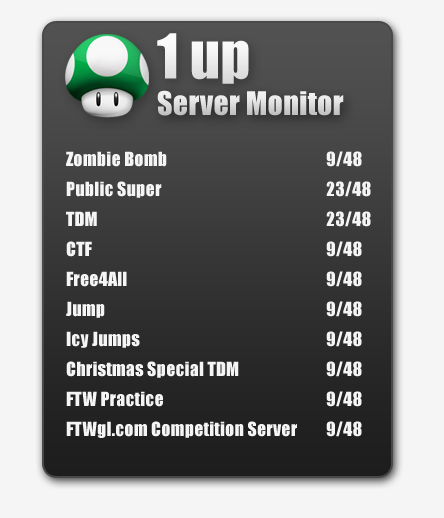
<style>
.page{position:relative;width:444px;height:518px;background:#f5f5f5}
.page>*{position:absolute;margin:0}
.t1{font:57.2px "Impact";letter-spacing:0.01em;color:#ffffff}
.t2{font:30px "Impact";letter-spacing:0.01em;color:#dcdcdc}
.t3{font:18px "Impact";letter-spacing:0.01em;color:#f5f5f5}
</style>
<div class="page">
<p class="t1" style="left:157px;top:33px;width:92px;height:51px">1 up</p>
<p class="t2" style="left:157px;top:90px;width:187px;height:26px">Server Monitor</p>
<p class="t3" style="left:66px;top:151px;width:101px;height:16px">Zombie Bomb</p>
<p class="t3" style="left:326px;top:151px;width:36px;height:16px">9/48</p>
<p class="t3" style="left:66px;top:181px;width:96px;height:17px">Public Super</p>
<p class="t3" style="left:326px;top:181px;width:45px;height:16px">23/48</p>
<p class="t3" style="left:66px;top:211px;width:31px;height:15px">TDM</p>
<p class="t3" style="left:326px;top:211px;width:45px;height:16px">23/48</p>
<p class="t3" style="left:66px;top:241px;width:26px;height:16px">CTF</p>
<p class="t3" style="left:326px;top:241px;width:36px;height:16px">9/48</p>
<p class="t3" style="left:66px;top:271px;width:61px;height:16px">Free4All</p>
<p class="t3" style="left:326px;top:271px;width:36px;height:16px">9/48</p>
<p class="t3" style="left:66px;top:301px;width:39px;height:17px">Jump</p>
<p class="t3" style="left:326px;top:301px;width:36px;height:16px">9/48</p>
<p class="t3" style="left:66px;top:331px;width:74px;height:17px">Icy Jumps</p>
<p class="t3" style="left:326px;top:331px;width:36px;height:16px">9/48</p>
<p class="t3" style="left:66px;top:361px;width:173px;height:17px">Christmas Special TDM</p>
<p class="t3" style="left:326px;top:361px;width:36px;height:16px">9/48</p>
<p class="t3" style="left:66px;top:391px;width:97px;height:16px">FTW Practice</p>
<p class="t3" style="left:326px;top:391px;width:36px;height:16px">9/48</p>
<p class="t3" style="left:66px;top:421px;width:231px;height:17px">FTWgl.com Competition Server</p>
<p class="t3" style="left:326px;top:421px;width:36px;height:16px">9/48</p>
</div>
